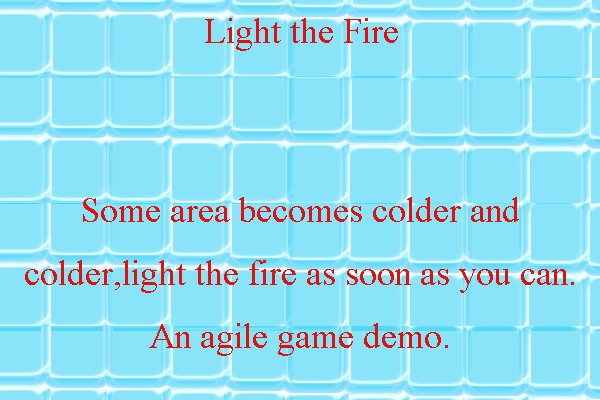
<style>
.page{position:relative;width:600px;height:400px;background:#8ae4f9}
.page>*{position:absolute;margin:0}
.t1{font:36px "TimesNewRomanPSMT";color:#e2110c}
</style>
<div class="page">
<p class="t1" style="left:205px;top:18px;width:193px;height:33px">Light the Fire</p>
<p class="t1" style="left:25px;top:197px;width:549px;height:159px;text-align:center">Some area becomes colder and          colder,light the fire as soon as you can.<br>An agile game demo.</p>
</div>
